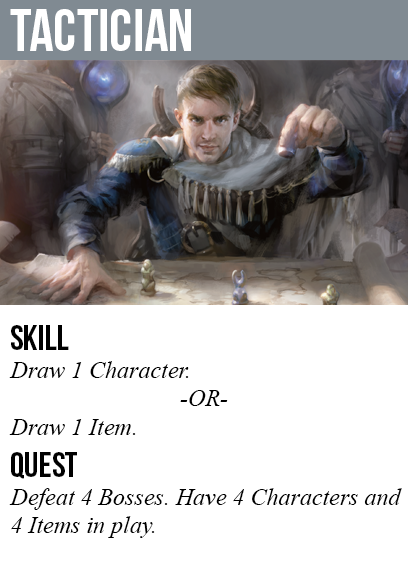
<style>
.page{position:relative;width:408px;height:585px;background:#ffffff}
.page>*{position:absolute;margin:0}
.t1{font:60px "BebasNeue";color:#ffffff}
.t2{font:36px "BebasNeue";color:#000000}
.t3{font:24px "TimesNewRomanPS-ItalicMT";color:#000000}
</style>
<div class="page">
<p class="t1" style="left:10px;top:9px;width:181px;height:42px">tactician</p>
<p class="t2" style="left:11px;top:325px;width:58px;height:25px">skill</p>
<p class="t3" style="left:9px;top:361px;width:180px;height:74px">Draw 1 Character.<br><br>Draw 1 Item.</p>
<p class="t3" style="left:180px;top:390px;width:48px;height:16px">-OR-</p>
<p class="t2" style="left:11px;top:452px;width:66px;height:27px">quest</p>
<p class="t3" style="left:9px;top:488px;width:393px;height:50px">Defeat 4 Bosses. Have 4 Characters and<br>4 Items in play.</p>
</div>
